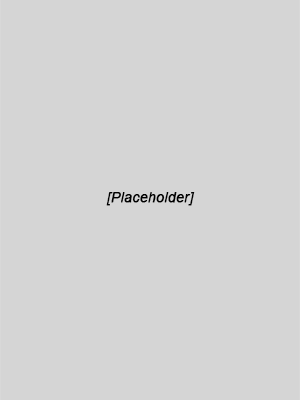
<style>
.page{position:relative;width:300px;height:400px;background:#d5d5d5}
.page>*{position:absolute;margin:0}
.t1{font:14px "Arial-ItalicMT";color:#000000;font-weight:bold}
</style>
<div class="page">
<p class="t1" style="left:106px;top:192px;width:89px;height:14px">[Placeholder]</p>
</div>
